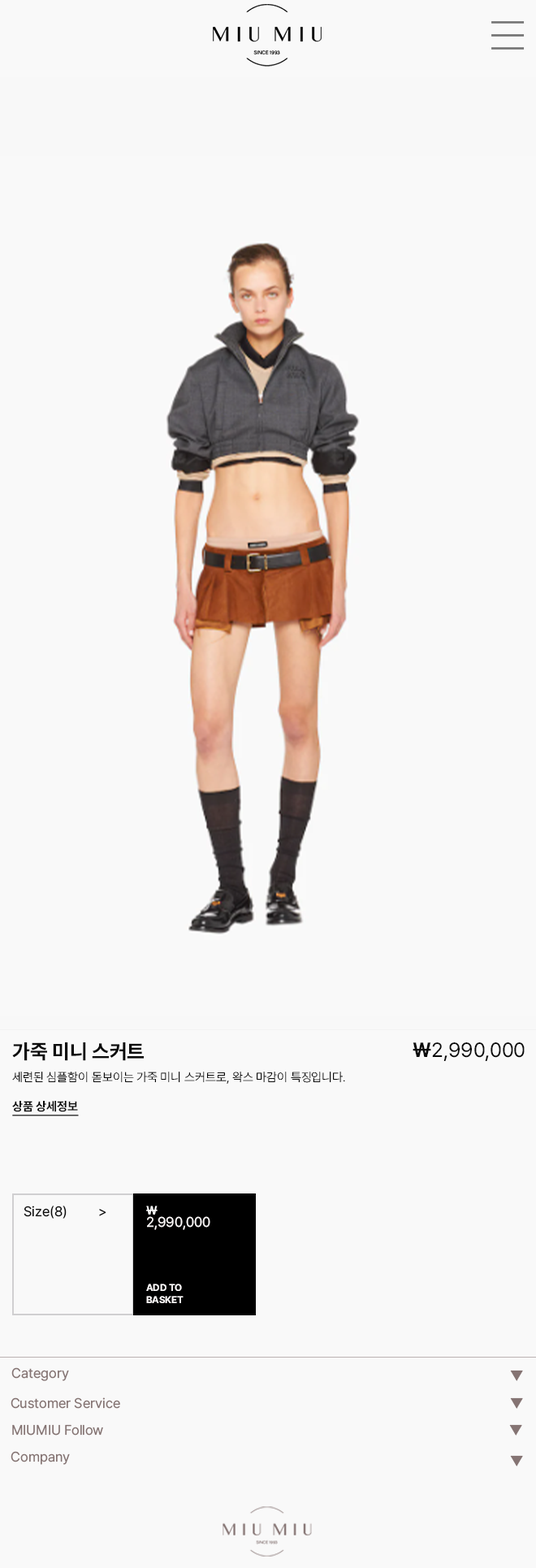
<style>
.page{position:relative;width:536px;height:1568px;background:#f9f9f9}
.page>*{position:absolute;margin:0}
.t1{font:20.3px "Pretendard-Bold";color:#0b0b0b}
.t2{font:20.3px "Pretendard-Regular";color:#0b0b0b}
.t3{font:12.2px "Pretendard-ExtraLight";color:#0b0b0b}
.t4{font:12.2px "Pretendard-Bold";color:#0b0b0b;text-decoration:underline}
.t5{font:13.8px "Pretendard-Regular";color:#0b0b0b}
.t6{font:12.2px "Pretendard-Bold";color:#ffffff}
.t7{font:13.8px "Pretendard-Regular";color:#faf7f7}
.t8{font:9.7px "Pretendard-Bold";color:#faf7f7}
.t9{font:13.8px "Pretendard-Regular";color:#857473}
</style>
<div class="page">
<p class="t1" style="left:12px;top:1042px;width:132px;height:19px">가죽 미니 스커트</p>
<p class="t2" style="left:413px;top:1042px;width:112px;height:19px"><span class="t1">￦</span>2,990,000</p>
<p class="t3" style="left:12px;top:1072px;width:333px;height:44px">세련된 심플함이 돋보이는 가죽 미니 스커트로, 왁스 마감이 특징입니다. <br><br><span class="t4">상품 상세정보</span></p>
<p class="t5" style="left:24px;top:1206px;width:82px;height:13px">Size(8)         &gt;</p>
<p class="t6" style="left:146px;top:1206px;width:12px;height:9px">￦</p>
<p class="t7" style="left:147px;top:1216px;width:63px;height:14px">2,990,000</p>
<p class="t8" style="left:146px;top:1284px;width:38px;height:19px">ADD TO<br>BASKET</p>
<p class="t9" style="left:11px;top:1367px;width:58px;height:14px">Category</p>
<p class="t9" style="left:510px;top:1370px;width:13px;height:11px">▼</p>
<p class="t9" style="left:11px;top:1397px;width:109px;height:12px">Customer Service</p>
<p class="t9" style="left:510px;top:1397px;width:13px;height:12px">▼</p>
<p class="t9" style="left:12px;top:1424px;width:91px;height:12px">MIUMIU Follow</p>
<p class="t9" style="left:509px;top:1424px;width:13px;height:12px">▼</p>
<p class="t9" style="left:11px;top:1451px;width:59px;height:14px">Company</p>
<p class="t9" style="left:510px;top:1455px;width:13px;height:11px">▼</p>
</div>
